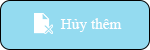
<style>
.page{position:relative;width:150px;height:50px;background:#94dbf0}
.page>*{position:absolute;margin:0}
.t1{font:15.3px "TimesNewRomanPSMT";color:#fefefe}
</style>
<div class="page">
<p class="t1" style="left:60px;top:18px;width:62px;height:14px">Hủy thêm</p>
</div>
